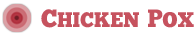
<style>
.page{position:relative;width:195px;height:36px;background:#ffffff}
.page>*{position:absolute;margin:0}
.t1{font:30px "ChunkFive-Roman";color:#c6525e;font-variant:small-caps;scale:0.95 1}
.t2{font:25px "ChunkFive-Roman";color:#c6525e;font-variant:small-caps;scale:0.95 1}
</style>
<div class="page">
<p class="t1" style="left:41px;top:9px;width:98px;height:19px"><span class="t2">C</span>hicken</p>
<p class="t1" style="left:148px;top:9px;width:46px;height:19px"><span class="t2">P</span>ox</p>
</div>
